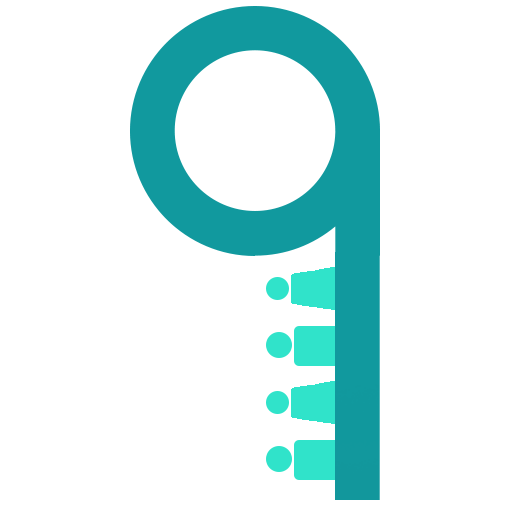
<style>
.page{position:relative;width:512px;height:512px;background:#ffffff}
.page>*{position:absolute;margin:0}
.t1{font:357.5px "AzonixRegular";color:#11999e}
</style>
<div class="page">
<p class="t1" style="left:129px;top:6px;width:251px;height:250px;rotate:90deg">Q</p>
</div>
